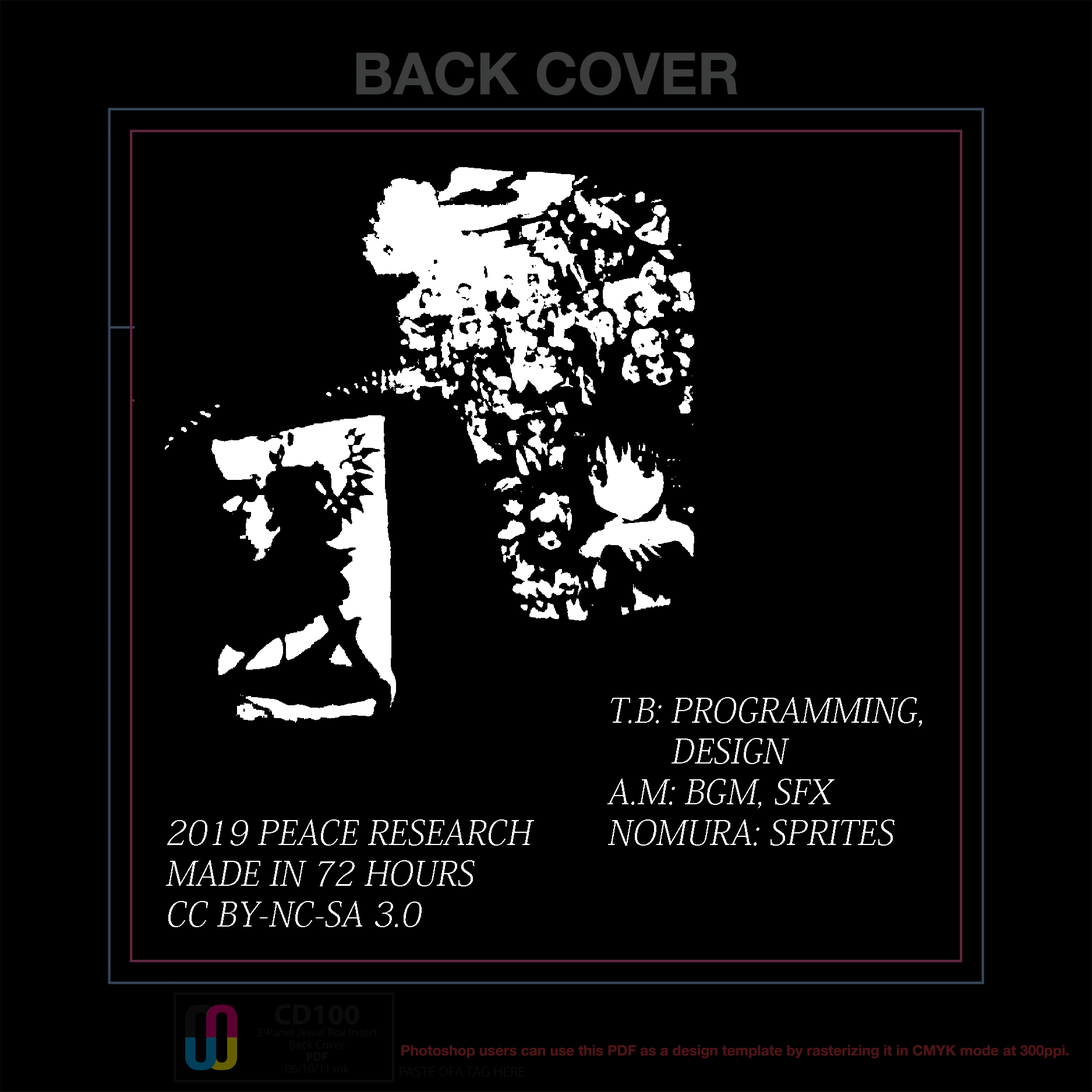
<style>
.page{position:relative;width:1092px;height:1092px;background:#000000}
.page>*{position:absolute;margin:0}
.t1{font:34px "KozMinPro-ExtraLight";color:#ffffff;font-style:italic}
.t2{font:34px "KozMinPro-ExtraLight";color:#000000;font-style:italic}
</style>
<div class="page">
<p class="t1" style="left:607px;top:697px;width:333px;height:149px;text-align:right">T.B: PROGRAMMING,<span class="t2">a<br>T.B: </span>DESIGN<br>A.M: BGM, SFX<br>NOMURA: SPRITES</p>
<p class="t1" style="left:150px;top:819px;width:384px;height:108px;text-align:right"><span class="t2">a</span>2019 PEACE RESEARCH<br><span class="t2">a</span>MADE IN 72 HOURS<br><span class="t2">a</span>CC BY-NC-SA 3.0</p>
</div>
